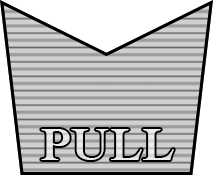
<style>
.page{position:relative;width:213px;height:175px;background:#d0d0d0}
.page>*{position:absolute;margin:0}
.t1{font:48px "Cochin-Bold";color:#eaeaea}
</style>
<div class="page">
<p class="t1" style="left:41px;top:129px;width:133px;height:31px">PULL</p>
</div>
